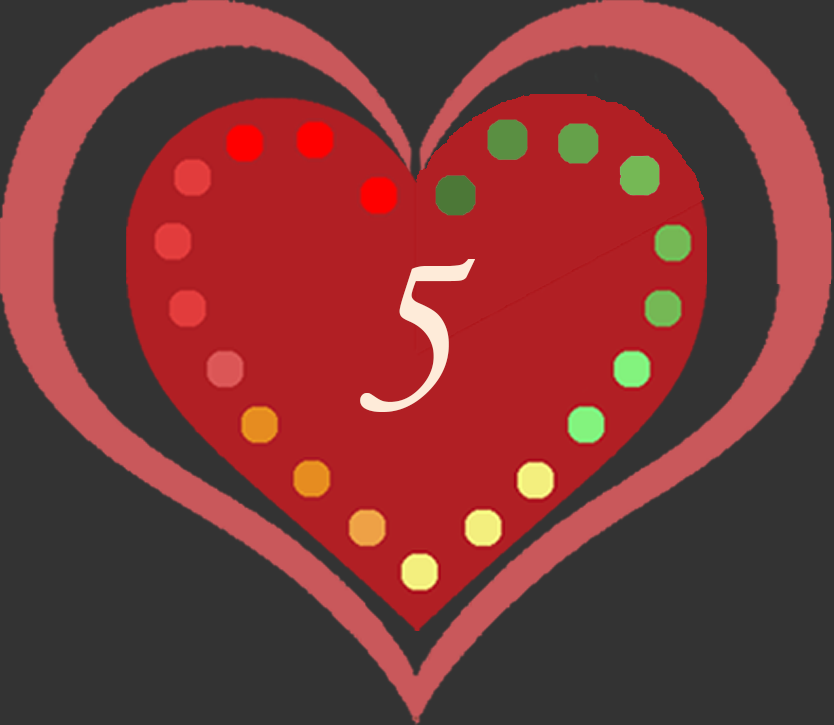
<style>
.page{position:relative;width:834px;height:725px;background:#333333}
.page>*{position:absolute;margin:0}
.t1{font:250px "MonotypeCorsiva";color:#feebd9}
</style>
<div class="page">
<p class="t1" style="left:360px;top:259px;width:115px;height:153px">5</p>
</div>
